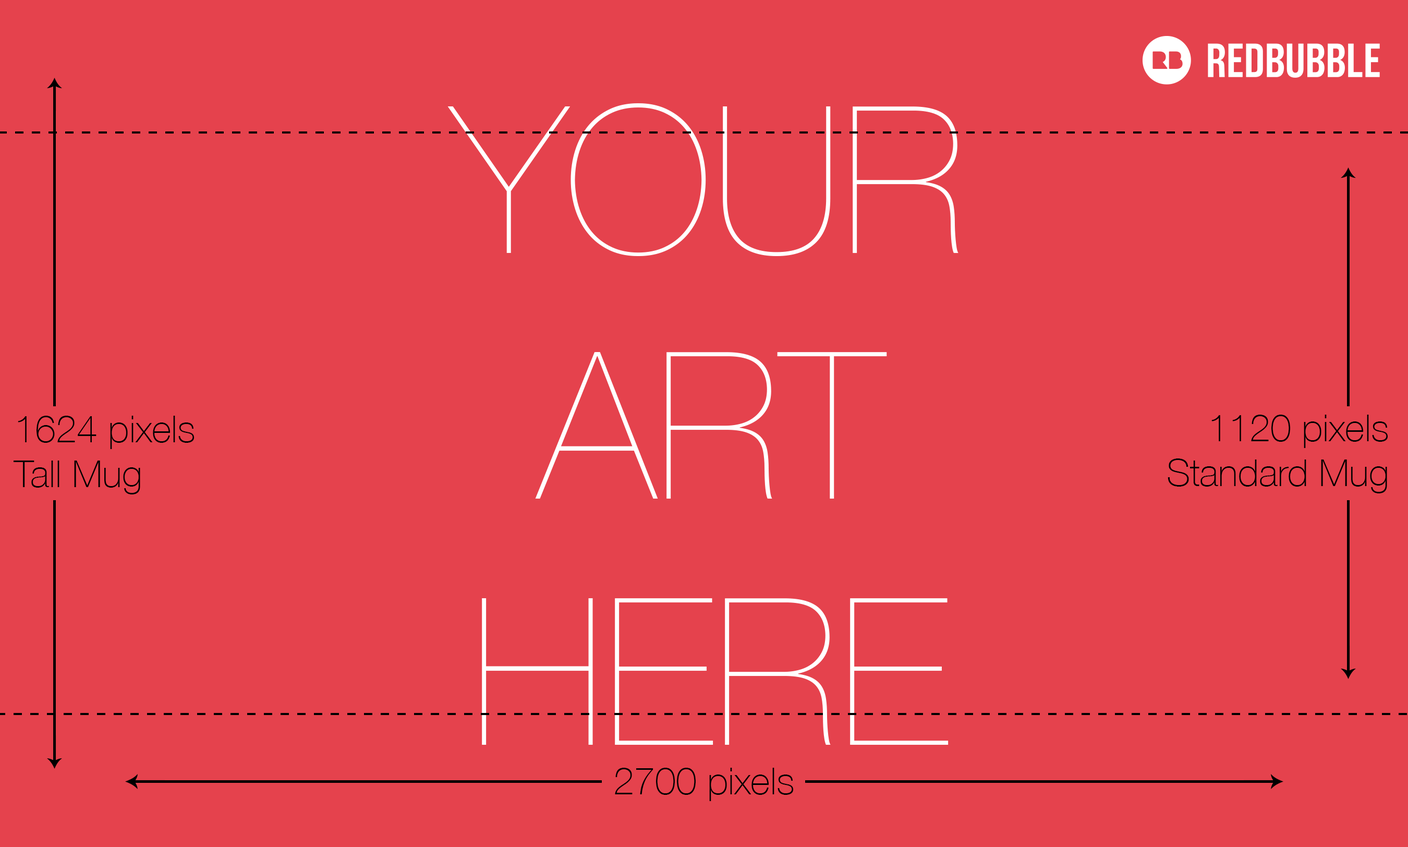
<style>
.page{position:relative;width:1408px;height:847px;background:#e5424d}
.page>*{position:absolute;margin:0}
.t1{font:37.5px "HelveticaNeue-Thin";color:#000000}
</style>
<div class="page">
<p class="t1" style="left:14px;top:416px;width:180px;height:78px">1624 pixels<br>Tall Mug</p>
<p class="t1" style="left:1168px;top:415px;width:220px;height:78px;text-align:right">1120 pixels<br>Standard Mug</p>
<p class="t1" style="left:615px;top:768px;width:178px;height:33px">2700 pixels</p>
</div>
